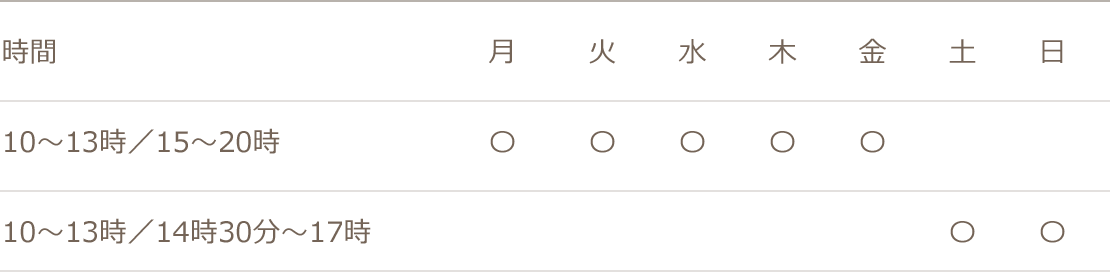
<style>
.page{position:relative;width:1110px;height:272px;background:#ffffff}
.page>*{position:absolute;margin:0}
.t1{font:28px/90px "Meiryo";color:#746457}
</style>
<div class="page">
<p class="t1" style="left:3px;top:38px;width:368px;height:206px">時間 <br>10～13時／15～20時<br>10～13時／14時30分～17時</p>
<p class="t1" style="left:489px;top:39px;width:26px;height:114px;text-align:center">月<br>〇</p>
<p class="t1" style="left:589px;top:39px;width:27px;height:114px;text-align:center">火<br>〇</p>
<p class="t1" style="left:678px;top:39px;width:28px;height:114px;text-align:center">水<br>〇</p>
<p class="t1" style="left:768px;top:39px;width:29px;height:114px;text-align:center">木<br>〇</p>
<p class="t1" style="left:859px;top:38px;width:27px;height:115px;text-align:center">金<br>〇</p>
<p class="t1" style="left:949px;top:39px;width:27px;height:204px;text-align:center">土<br><br>〇</p>
<p class="t1" style="left:1040px;top:40px;width:25px;height:203px;text-align:center">日<br><br>〇</p>
</div>
